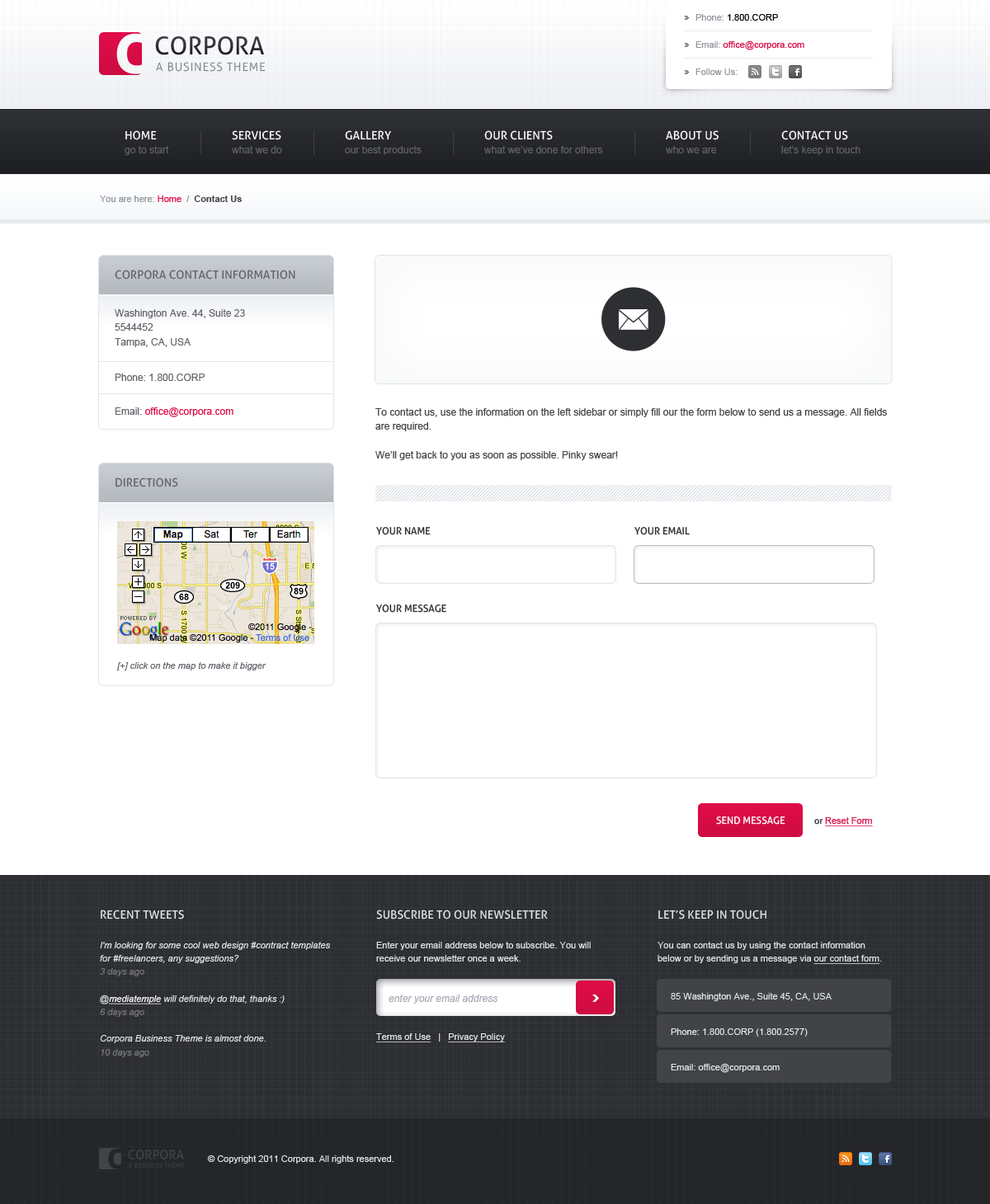
<style>
.page{position:relative;width:990px;height:1204px;background:#ffffff}
.page>*{position:absolute;margin:0}
.t1{font:9.1px "ArialMT";color:#dc0c46}
.t2{font:9.1px "ArialMT";color:#92979d}
.t3{font:9.1px "ArialMT";color:#000000}
.t4{font:24.7px "Aller";color:#3d3f46}
.t5{font:11.5px "Aller-Light";letter-spacing:0.06em;color:#7f828f}
.t6{font:9.9px "ArialMT";color:#606168}
.t7{font:11.5px "Aller";color:#ffffff}
.t8{font:9.1px "ArialMT";color:#dd0c46}
.t9{font:9.1px "Arial-BoldMT";color:#444549}
.t10{font:11.5px "Aller";color:#62656b;text-transform:uppercase}
.t11{font:9.9px "ArialMT";color:#62656b}
.t12{font:9.9px "ArialMT";color:#dd0c46}
.t13{font:9.9px "ArialMT";color:#444549}
.t14{font:9.9px "Aller";color:#2d2f33;text-transform:uppercase}
.t15{font:9.1px "Arial-ItalicMT";color:#62656b}
.t16{font:9.9px "Aller";color:#ffffff;text-transform:uppercase}
.t17{font:9.1px "ArialMT";color:#d70c45;text-decoration:underline}
.t18{font:9.1px "Aller";color:#2d2f33}
.t19{font:9.1px "Arial-ItalicMT";color:#e1e5e9}
.t20{font:11.5px "Aller";color:#e1e5e9;text-transform:uppercase}
.t21{font:9.1px "Arial-ItalicMT";color:#77797c}
.t22{font:9.1px "Arial-ItalicMT";color:#ffffff;text-decoration:underline}
.t23{font:9.1px "ArialMT";color:#e1e5e9}
.t24{font:9.1px "ArialMT";color:#e1e5e9;text-decoration:underline}
.t25{font:9.9px "Arial-ItalicMT";color:#a8aab4}
</style>
<div class="page">
<p class="t1" style="left:695px;top:14px;width:109px;height:61px"><span class="t2">Phone:</span><span class="t3"> 1.800.CORP<br></span><span class="t2">Email: </span>office@corpora.com<br><span class="t2">Follow Us:</span></p>
<p class="t4" style="left:155px;top:36px;width:109px;height:19px">CORPORA</p>
<p class="t5" style="left:156px;top:62px;width:110px;height:10px">A BUSINESS THEME</p>
<p class="t6" style="left:125px;top:130px;width:44px;height:25px"><span class="t7">HOME<br></span>go to start</p>
<p class="t6" style="left:232px;top:130px;width:50px;height:23px"><span class="t7">SERVICES<br></span>what we do</p>
<p class="t6" style="left:345px;top:130px;width:77px;height:25px"><span class="t7">GALLERY<br></span>our best products</p>
<p class="t6" style="left:484px;top:130px;width:119px;height:23px"><span class="t7">OUR CLIENTS<br></span>what we’ve done for others</p>
<p class="t6" style="left:666px;top:130px;width:53px;height:23px"><span class="t7">ABOUT US<br></span>who we are</p>
<p class="t6" style="left:781px;top:130px;width:79px;height:25px"><span class="t7">CONTACT US<br></span>let’s keep in touch</p>
<p class="t2" style="left:100px;top:196px;width:142px;height:6px">You are here: <span class="t8">Home </span> /  <span class="t9">Contact Us</span></p>
<p class="t10" style="left:115px;top:270px;width:180px;height:10px">corpora contact information</p>
<p class="t11" style="left:115px;top:309px;width:130px;height:38px">Washington Ave. 44, Suite 23<br>5544452<br>Tampa, CA, USA</p>
<p class="t11" style="left:115px;top:374px;width:90px;height:7px">Phone: 1.800.CORP</p>
<p class="t12" style="left:115px;top:408px;width:118px;height:9px"><span class="t11">Email: </span>office@corpora.com</p>
<p class="t13" style="left:375px;top:408px;width:512px;height:52px">To contact us, use the information on the left sidebar or simply fill our the form below to send us a message. All fields <br>are required. <br><br>We’ll get back to you as soon as possible. Pinky swear!</p>
<p class="t10" style="left:115px;top:478px;width:63px;height:10px">directions</p>
<p class="t14" style="left:376px;top:527px;width:55px;height:8px">your name</p>
<p class="t14" style="left:634px;top:527px;width:56px;height:8px">your email</p>
<p class="t14" style="left:376px;top:605px;width:70px;height:8px">your message</p>
<p class="t15" style="left:117px;top:662px;width:149px;height:9px">[+] click on the map to make it bigger</p>
<p class="t16" style="left:716px;top:817px;width:69px;height:8px">Send Message</p>
<p class="t17" style="left:814px;top:818px;width:59px;height:9px"><span class="t18">or </span>Reset Form</p>
<p class="t19" style="left:100px;top:910px;width:231px;height:148px"><span class="t20">recent tweets<br><br></span>I'm looking for some cool web design #contract templates <br>for #freelancers, any suggestions?<br><span class="t21">3 days ago<br></span><br>@<span class="t22">mediatemple</span> will definitely do that, thanks :)<br><span class="t21">6 days ago<br></span><br>Corpora Business Theme is almost done.<br><span class="t21">10 days ago</span></p>
<p class="t23" style="left:376px;top:910px;width:215px;height:52px"><span class="t20">SUBSCRIBE TO OUR NEWSLETTER<br><br></span>Enter your email address below to subscribe. You will <br>receive our newsletter once a week.</p>
<p class="t23" style="left:658px;top:910px;width:224px;height:54px"><span class="t20">let’s keep in touch<br><br></span>You can contact us by using the contact information <br>below or by sending us a message via <span class="t24">our contact form</span>.</p>
<p class="t25" style="left:389px;top:995px;width:109px;height:9px">enter your email address</p>
<p class="t23" style="left:671px;top:993px;width:161px;height:9px">85 Washington Ave., Suite 45, CA, USA</p>
<p class="t24" style="left:376px;top:1034px;width:129px;height:9px">Terms of Use<span class="t23">   |   </span>Privacy Policy</p>
<p class="t23" style="left:671px;top:1029px;width:137px;height:8px">Phone: 1.800.CORP (1.800.2577)</p>
<p class="t23" style="left:671px;top:1063px;width:109px;height:10px">Email: office@corpora.com</p>
<p class="t23" style="left:207px;top:1156px;width:187px;height:8px">© Copyright 2011 Corpora. All rights reserved.</p>
</div>
